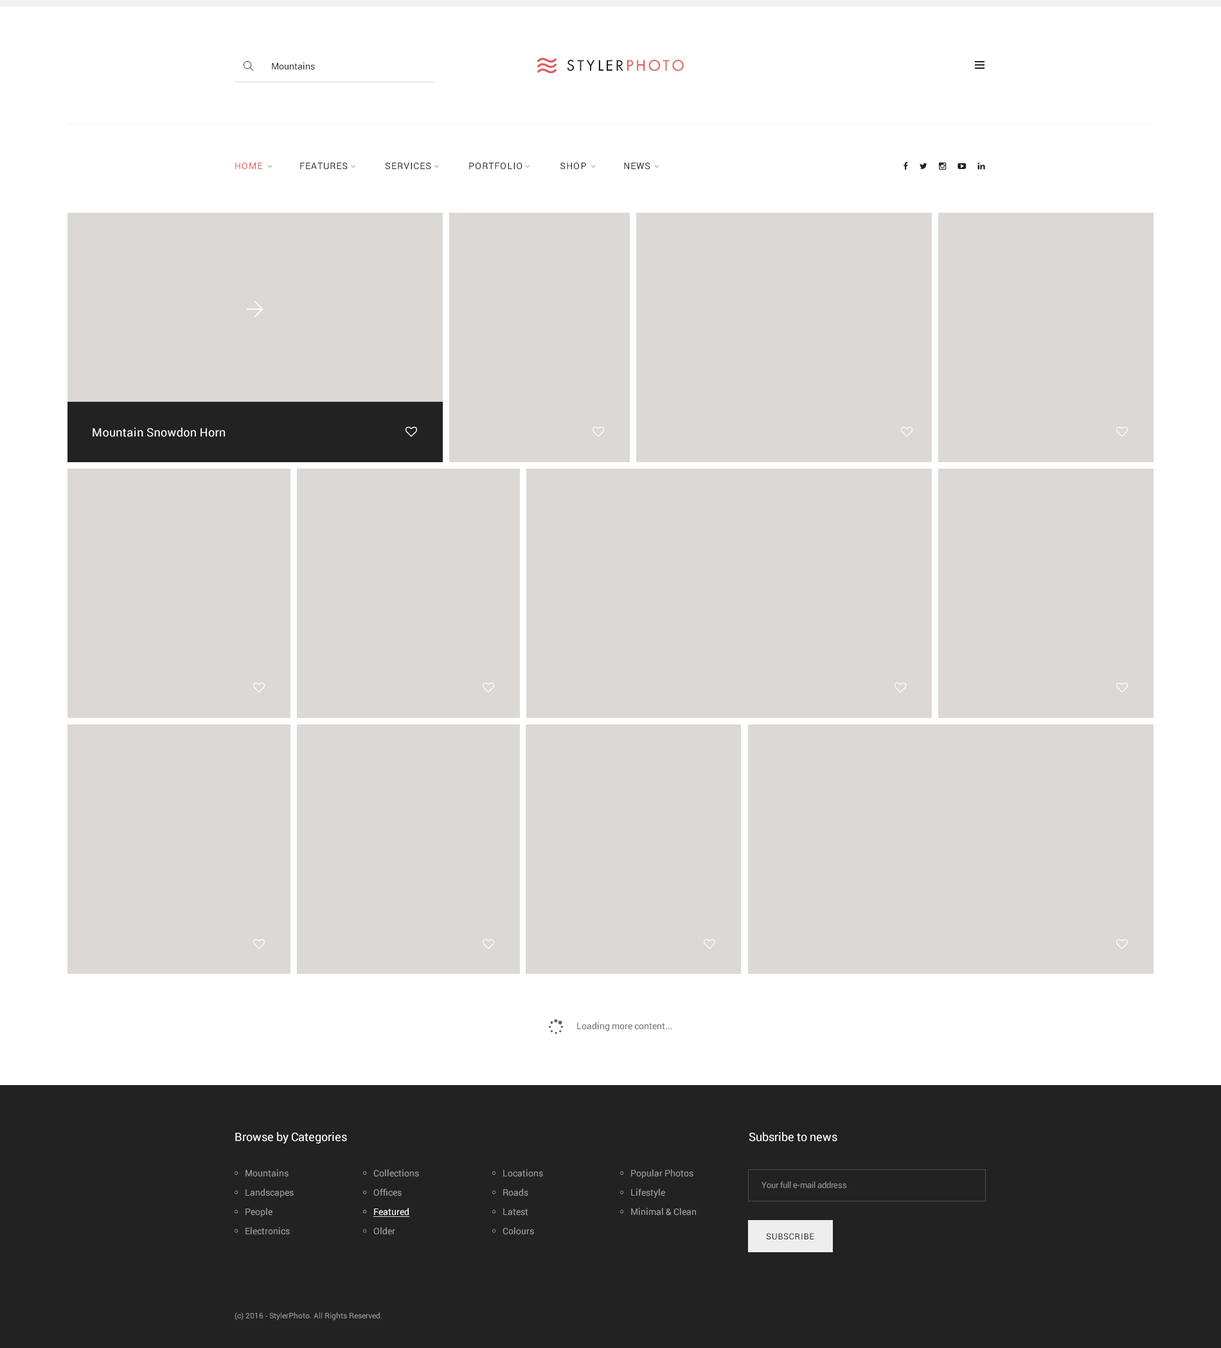
<style>
.page{position:relative;width:1221px;height:1348px;background:#dbd8d5}
.page>*{position:absolute;margin:0}
.t1{font:9px "Roboto-Regular";color:#222222}
.t2{font:14.1px "FuturaLT";letter-spacing:0.2em;color:#222222;text-transform:uppercase}
.t3{font:14.1px "FuturaLT";letter-spacing:0.2em;color:#e15c5c;text-transform:uppercase}
.t4{font:9px "Roboto-Regular";letter-spacing:0.075em;color:#222222;text-transform:uppercase}
.t5{font:9px "Roboto-Regular";letter-spacing:0.075em;color:#e15c5c;text-transform:uppercase}
.t6{font:11.6px "Roboto-Regular";letter-spacing:0.025em;color:#ffffff}
.t7{font:9px "Roboto-Regular";color:#666666}
.t8{font:11.6px "Roboto-Regular";color:#ffffff}
.t9{font:9px/19.3px "Roboto-Regular";color:#9f9e9e}
.t10{font:9px/19.3px "Roboto-Regular";color:#ffffff;text-decoration:underline}
.t11{font:8.4px "Roboto-Regular";color:#939393}
.t12{font:8.4px "Roboto-Regular";letter-spacing:0.05em;color:#222222;text-transform:uppercase}
.t13{font:7.7px "Roboto-Regular";color:#939393}
</style>
<div class="page">
<p class="t1" style="left:272px;top:62px;width:43px;height:8px">Mountains</p>
<p class="t2" style="left:567px;top:60px;width:117px;height:11px">styler<span class="t3">photo</span></p>
<p class="t4" style="left:235px;top:163px;width:416px;height:7px"><span class="t5">HOME</span>              FEATURES              SERVICES              portfolio              SHOP              NEWS</p>
<p class="t6" style="left:93px;top:428px;width:132px;height:9px">Mountain Snowdon Horn</p>
<p class="t7" style="left:577px;top:1022px;width:95px;height:9px">Loading more content...</p>
<p class="t8" style="left:235px;top:1132px;width:112px;height:12px">Browse by Categories</p>
<p class="t8" style="left:750px;top:1132px;width:88px;height:10px">Subsribe to news</p>
<p class="t9" style="left:246px;top:1169px;width:48px;height:66px">Mountains<br>Landscapes<br>People<br>Electronics</p>
<p class="t9" style="left:374px;top:1169px;width:45px;height:66px">Collections<br>Offices<br><span class="t10">Featured<br></span>Older</p>
<p class="t9" style="left:503px;top:1169px;width:40px;height:66px">Locations<br>Roads<br>Latest<br>Colours</p>
<p class="t9" style="left:631px;top:1169px;width:65px;height:47px">Popular Photos<br>Lifestyle<br>Minimal &amp; Clean</p>
<p class="t11" style="left:762px;top:1182px;width:85px;height:7px">Your full e-mail address</p>
<p class="t12" style="left:766px;top:1233px;width:49px;height:7px">subscribe</p>
<p class="t13" style="left:235px;top:1312px;width:147px;height:8px">(c) 2016 - StylerPhoto. All Rights Reserved.</p>
</div>
